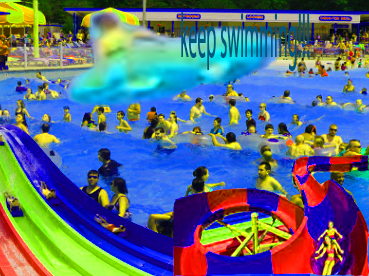
<style>
.page{position:relative;width:369px;height:276px}
.page>*{position:absolute;margin:0}
.t1{font:63.5px "MyriadPro-Regular";color:#00577c;scale:0.28 1}
</style>
<div class="page">
<p class="t1" style="left:181px;top:12px;width:129px;height:59px">keep swimming!!!</p>
</div>
